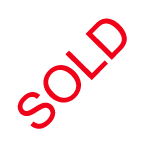
<style>
.page{position:relative;width:150px;height:150px;background:#ffffff}
.page>*{position:absolute;margin:0}
.t1{font:51px "ArialMT";color:#f00319}
</style>
<div class="page">
<p class="t1" style="left:17px;top:18px;width:110px;height:111px;rotate:-45deg">SOLD</p>
</div>
